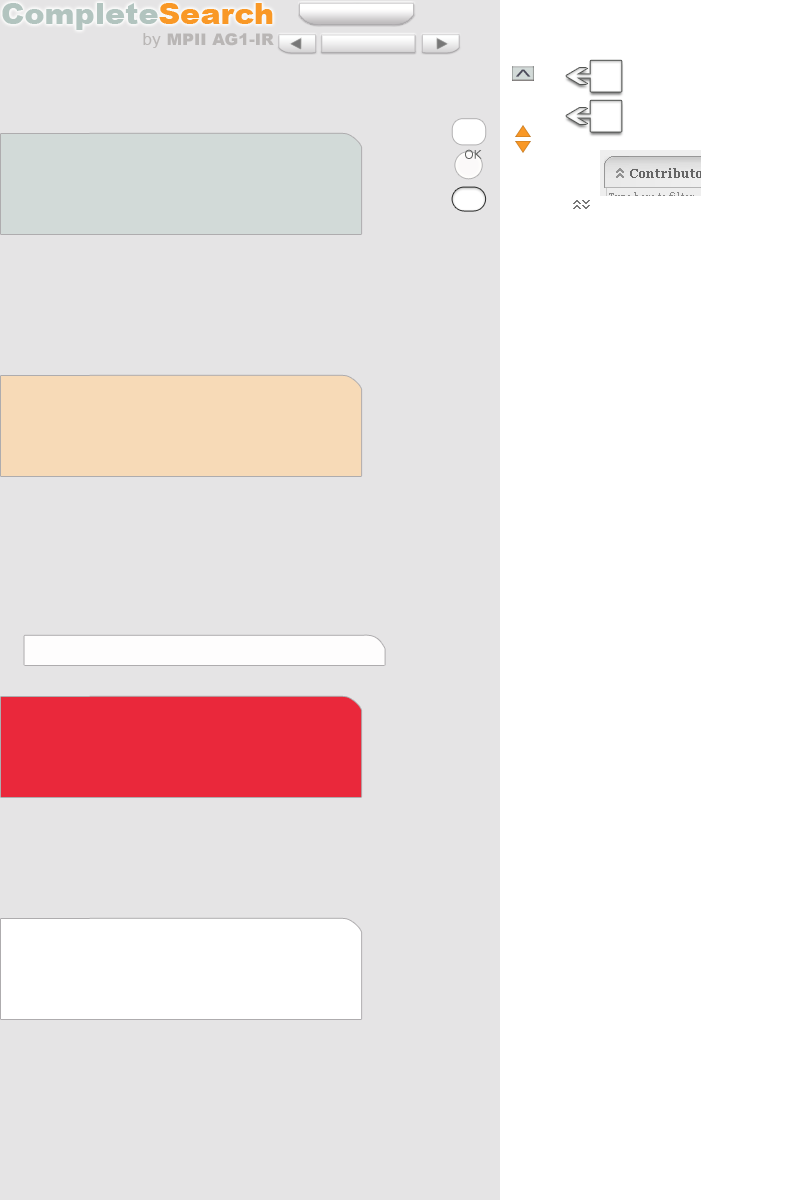
<style>
.page{position:relative;width:800px;height:1200px;background:#e5e4e5}
.page>*{position:absolute;margin:0}
.t1{font:29.2px "Arial-Black";color:#b2c4bf;scale:1.03 1}
.t2{font:29.2px "Arial-Black";color:#f99826;scale:1.03 1}
.t3{font:15.9px "Arial-Black";color:#b9b6b5;scale:1.03 1}
.t4{font:16.7px "ArialMT";color:#b9b6b5;scale:1.03 1}
.t5{font:29.3px "ArialNarrow";color:#4b4a5a;scale:0.61 1}
.t6{font:11.9px "BitstreamVeraSans-Roman";color:#606260}
</style>
<div class="page">
<p class="t1" style="left:2px;top:3px;width:271px;height:27px">Complete<span class="t2">Search</span></p>
<p class="t3" style="left:143px;top:33px;width:131px;height:15px"><span class="t4">by </span>MPII AG1-IR</p>
<p class="t5" style="left:516px;top:69px;width:15px;height:8px;rotate:90deg">&lt;</p>
<p class="t6" style="left:465px;top:149px;width:17px;height:10px">OK</p>
</div>
